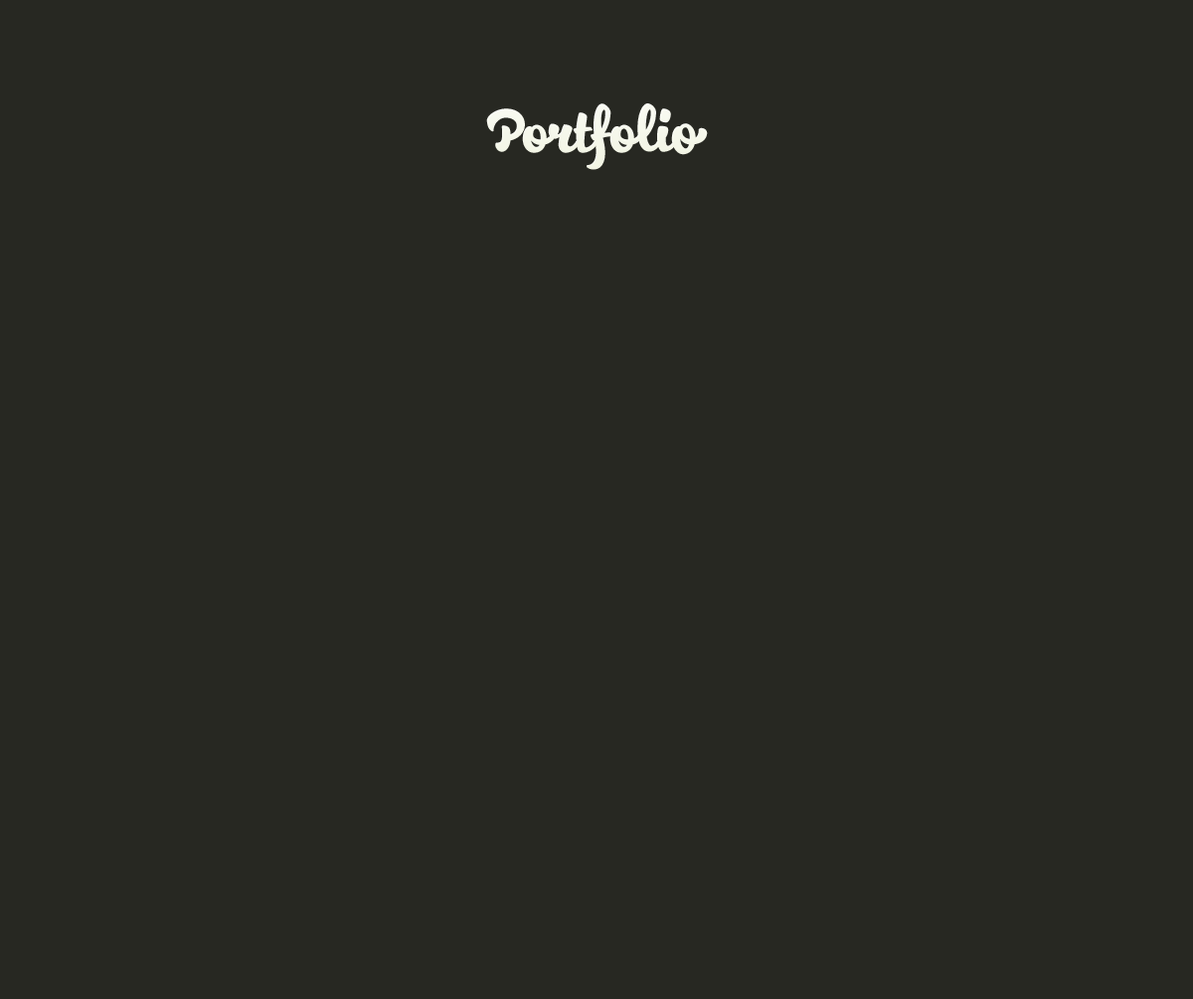
<style>
.page{position:relative;width:1193px;height:999px;background:#272822}
.page>*{position:absolute;margin:0}
.t1{font:71.6px "caballero";color:#f5f7ea}
</style>
<div class="page">
<p class="t1" style="left:486px;top:103px;width:222px;height:67px">Portfolio</p>
</div>
